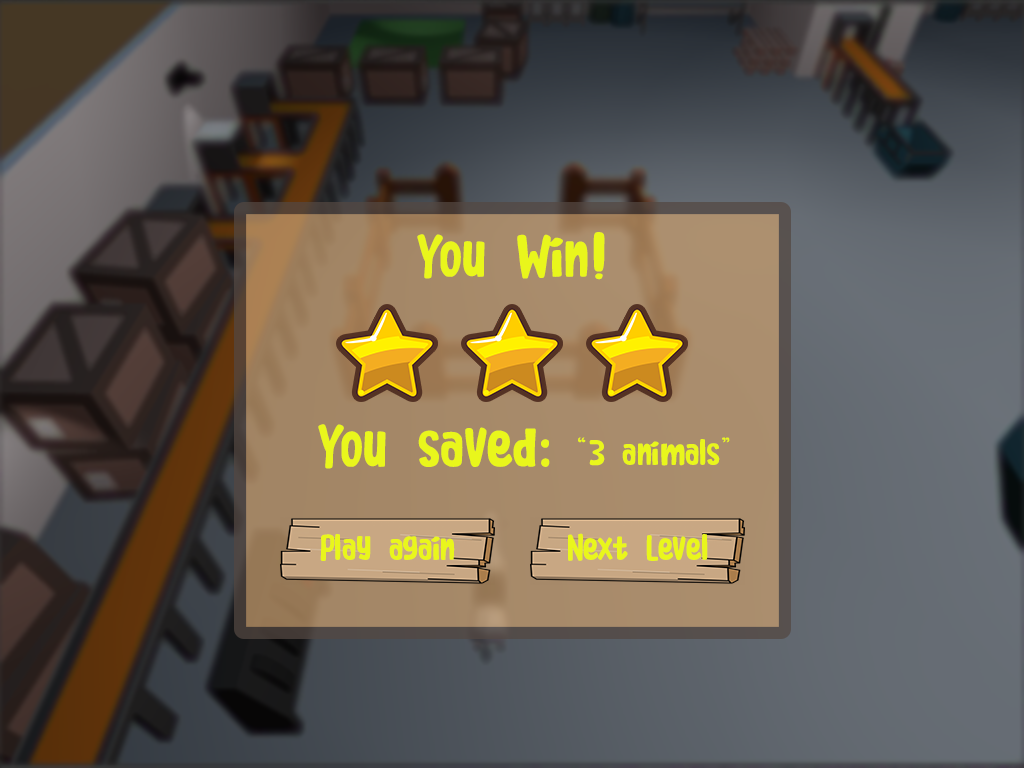
<style>
.page{position:relative;width:1024px;height:768px}
.page>*{position:absolute;margin:0}
.t1{font:60px "CoconutCookies";color:#e9f61c}
.t2{font:36px "CoconutCookies";color:#e9f61c}
</style>
<div class="page">
<p class="t1" style="left:417px;top:232px;width:188px;height:48px">You Win!</p>
<p class="t1" style="left:318px;top:424px;width:232px;height:45px">You saved:</p>
<p class="t2" style="left:578px;top:437px;width:152px;height:29px">“3 animals”</p>
<p class="t2" style="left:320px;top:534px;width:135px;height:27px">Play again</p>
<p class="t2" style="left:568px;top:533px;width:140px;height:28px">Next Level</p>
</div>
